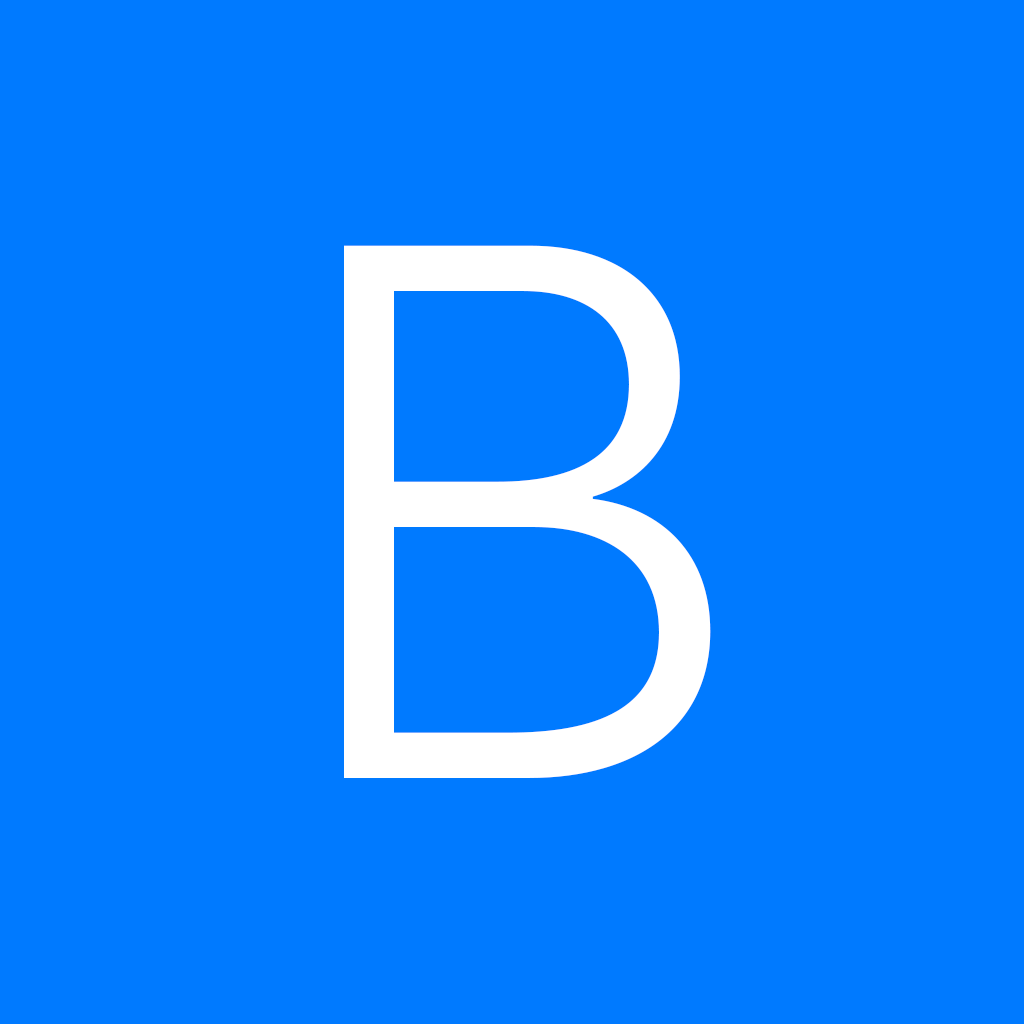
<style>
.page{position:relative;width:1024px;height:1024px;background:#007aff}
.page>*{position:absolute;margin:0}
.t1{font:800px "SanFranciscoText-Light";letter-spacing:0.02em;color:#ffffff}
</style>
<div class="page">
<p class="t1" style="left:344px;top:245px;width:367px;height:533px">B</p>
</div>
